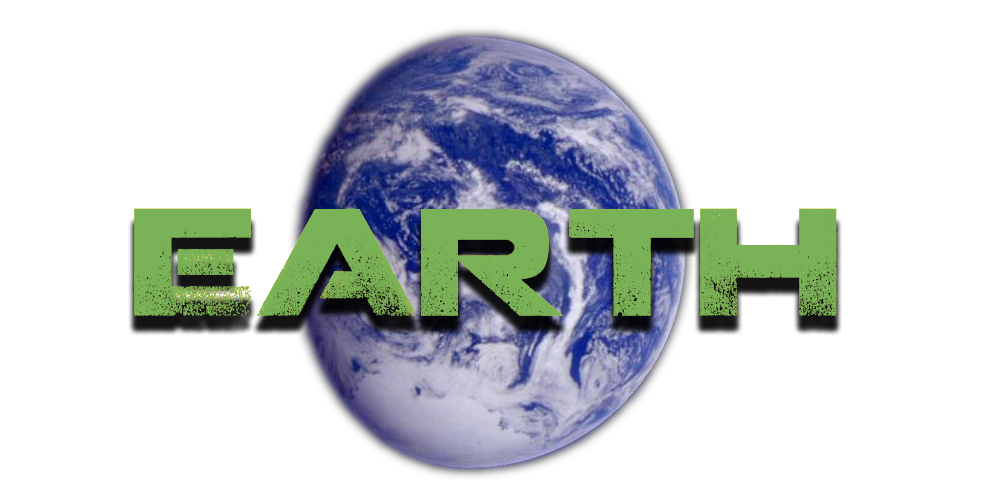
<style>
.page{position:relative;width:1000px;height:500px;background:#ffffff}
.page>*{position:absolute;margin:0}
.t1{font:150px "Coalition";color:#7ab257}
</style>
<div class="page">
<p class="t1" style="left:134px;top:208px;width:703px;height:108px">EARTH</p>
<p class="t1" style="left:134px;top:208px;width:703px;height:108px">EARTH</p>
</div>
